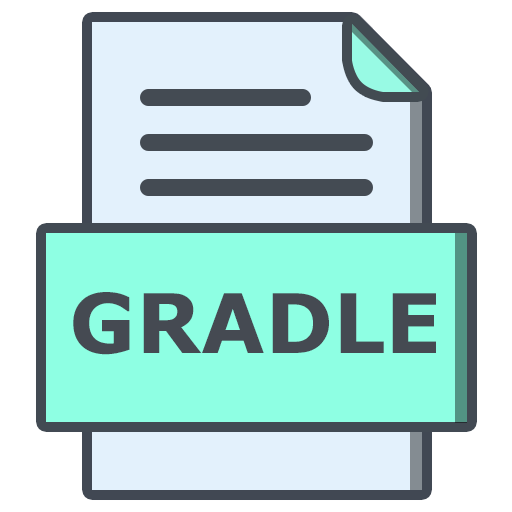
<style>
.page{position:relative;width:512px;height:512px;background:#ffffff}
.page>*{position:absolute;margin:0}
.t1{font:82.2px "Verdana-Bold";color:#454a52}
</style>
<div class="page">
<p class="t1" style="left:73px;top:292px;width:363px;height:63px">GRADLE</p>
</div>
